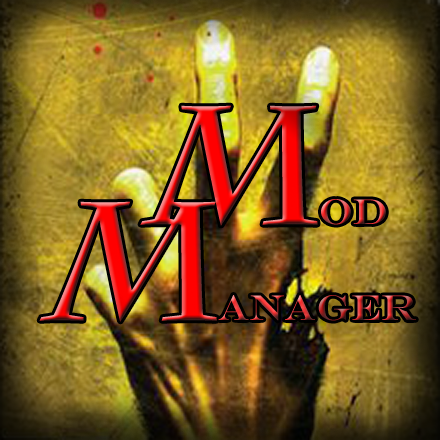
<style>
.page{position:relative;width:440px;height:440px}
.page>*{position:absolute;margin:0}
.t1{font:36px/96px "EngraversMT"}
.t2{font:144px/96px "CharlemagneStd-Bold";letter-spacing:0.1em;font-style:italic}
.t3{font:168px/96px "CharlemagneStd-Bold";font-style:italic}
</style>
<div class="page">
<p class="t1" style="left:39px;top:105px;width:377px;height:217px"><span class="t2">  </span><span class="t3">M</span>od<br><span class="t3">M</span>anager</p>
</div>
